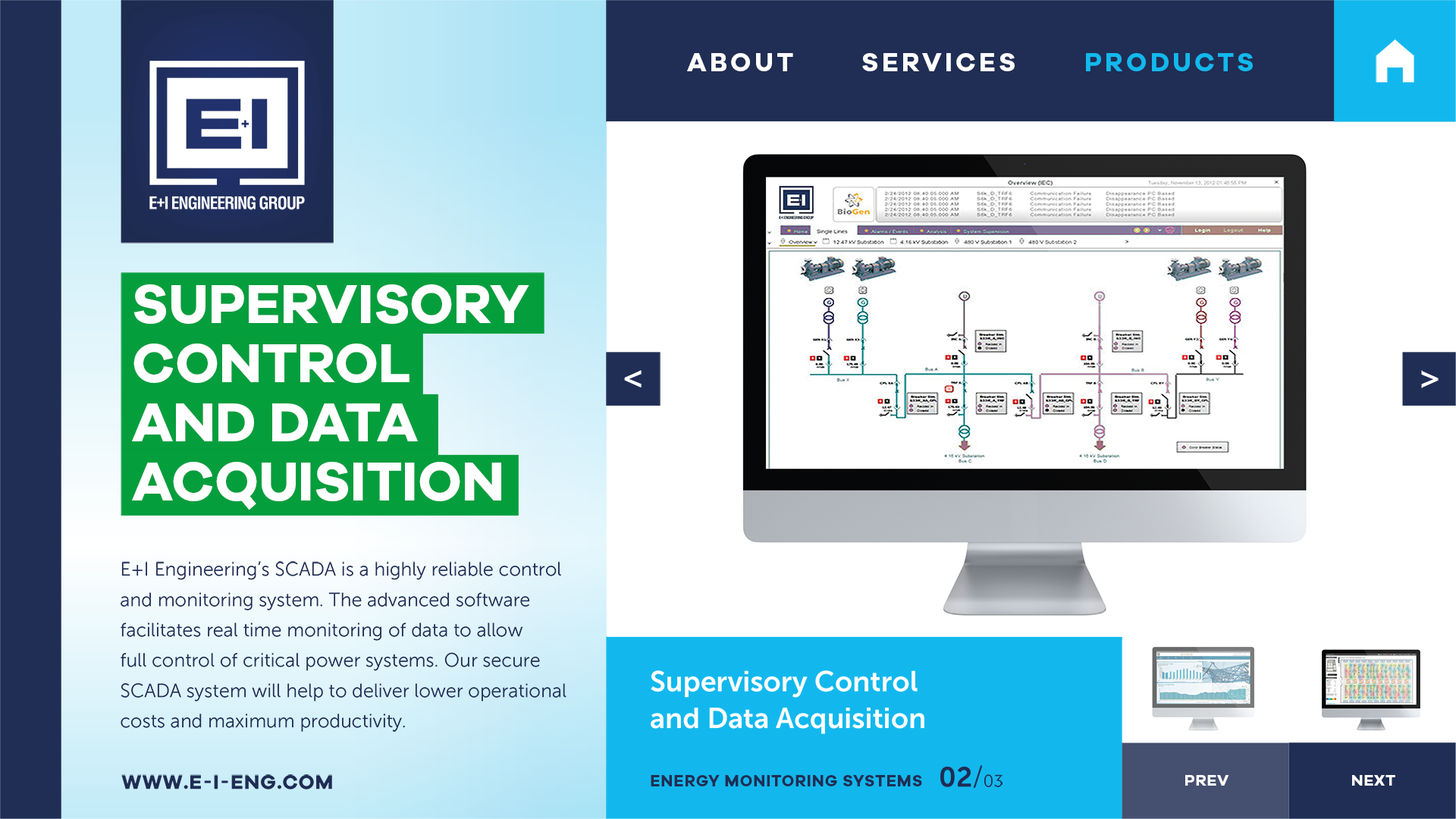
<style>
.page{position:relative;width:1456px;height:819px;background:#ffffff}
.page>*{position:absolute;margin:0}
.t1{font:26.5px "GalanoGrotesqueDEMO-Bold";letter-spacing:0.12em;color:#ffffff;text-transform:uppercase}
.t2{font:26.5px "GalanoGrotesqueDEMO-Bold";letter-spacing:0.12em;color:#12b8ed;text-transform:uppercase}
.t3{font:56.1px/59.1px "GalanoGrotesqueDEMO-Bold";color:#ffffff;text-transform:uppercase}
.t4{font:18.9px/30.3px "MuseoSans-300";color:#202d54}
.t5{font:28.5px/36.7px "MuseoSans-700";color:#ffffff}
.t6{font:27.7px "MuseoSans-700";color:#202d54}
.t7{font:27.7px "MuseoSans-300";color:#202d54}
.t8{font:16.5px "MuseoSans-300";color:#202d54}
.t9{font:20.3px "GalanoGrotesqueDEMO-Bold";letter-spacing:0.04em;color:#202d54;text-transform:uppercase}
.t10{font:20.3px "MuseoSans-700";letter-spacing:0.04em;color:#202d54;text-transform:uppercase}
.t11{font:16.2px "GalanoGrotesqueDEMO-Bold";letter-spacing:0.04em;color:#202d54;text-transform:uppercase}
.t12{font:15.8px "GalanoGrotesqueDEMO-Bold";letter-spacing:0.04em;color:#ffffff;text-transform:uppercase}
</style>
<div class="page">
<p class="t1" style="left:687px;top:53px;width:566px;height:18px">About       Services       <span class="t2">Products</span></p>
<p class="t3" style="left:132px;top:284px;width:397px;height:226px">Supervisory <br>Control <br>and Data <br>Acquisition</p>
<p class="t4" style="left:121px;top:561px;width:445px;height:171px">E+I Engineering’s SCADA is a highly reliable control and monitoring system. The advanced software facilitates real time monitoring of data to allow <br>full control of critical power systems. Our secure SCADA system will help to deliver lower operational costs and maximum productivity.</p>
<p class="t5" style="left:651px;top:670px;width:273px;height:64px">Supervisory Control <br>and Data Acquisition</p>
<p class="t6" style="left:940px;top:765px;width:63px;height:23px">02<span class="t7">/</span><span class="t8">03</span></p>
<p class="t9" style="left:121px;top:774px;width:211px;height:15px">www.e<span class="t10">-</span>i<span class="t10">-</span>eng.com</p>
<p class="t11" style="left:651px;top:775px;width:271px;height:11px">ENERGY MONITORING SYSTEMS</p>
<p class="t12" style="left:1185px;top:775px;width:44px;height:11px">PREV</p>
<p class="t12" style="left:1352px;top:775px;width:43px;height:11px">next</p>
</div>
